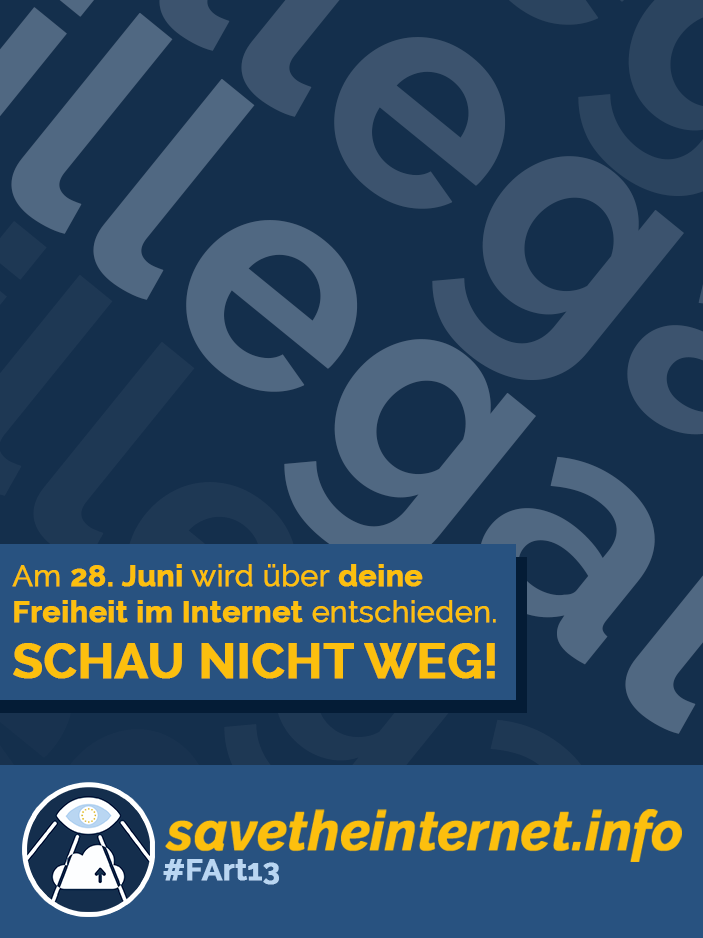
<style>
.page{position:relative;width:703px;height:938px;background:#142f4c}
.page>*{position:absolute;margin:0}
.t1{font:30px "Raleway-Bold";color:#fcbf0e;font-weight:bold}
.t2{font:30px "Raleway";color:#fcbf0e;font-weight:bold}
.t3{font:48.6px "Raleway-Bold";color:#fcbf0e;font-weight:bold}
.t4{font:54.5px "Raleway-BoldItalic";color:#fcbf0e;font-weight:bold;scale:0.96 1}
.t5{font:30px "Raleway-Bold";color:#b9d6f2;font-weight:bold}
</style>
<div class="page">
<p class="t1" style="left:12px;top:564px;width:484px;height:59px"><span class="t2">Am </span>28. Juni<span class="t2"> wird über </span>deine<br>Freiheit im Internet<span class="t2"> entschieden.</span></p>
<p class="t3" style="left:13px;top:643px;width:482px;height:36px">SCHAU NICHT WEG!</p>
<p class="t4" style="left:165px;top:809px;width:517px;height:53px">savetheinternet.info</p>
<p class="t5" style="left:163px;top:859px;width:116px;height:26px">#FArt13</p>
</div>
